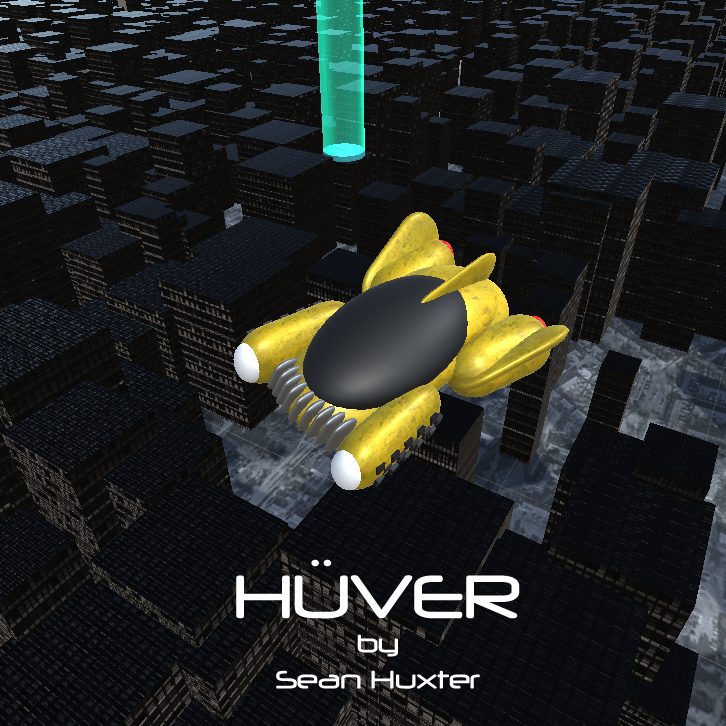
<style>
.page{position:relative;width:726px;height:726px}
.page>*{position:absolute;margin:0}
.t1{font:72px "Neuropol";color:#ffffff}
.t2{font:30px "Neuropol";color:#ffffff}
</style>
<div class="page">
<p class="t1" style="left:236px;top:559px;width:284px;height:60px">HÜVER</p>
<p class="t2" style="left:276px;top:634px;width:204px;height:55px;text-align:center">by<br>Sean Huxter</p>
</div>
